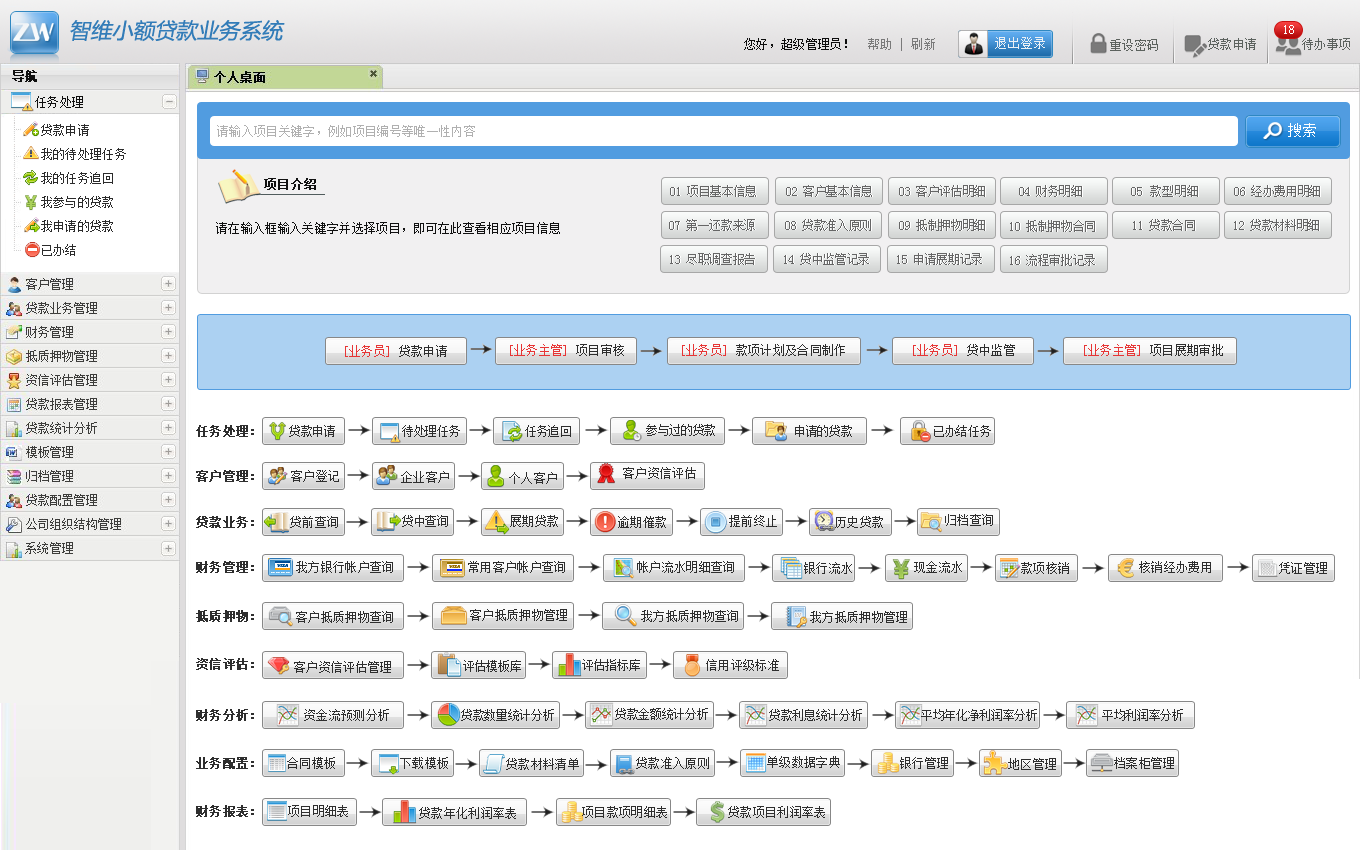
<style>
.page{position:relative;width:1360px;height:850px;background:#ffffff}
.page>*{position:absolute;margin:0}
.t1{font:21.3px "MicrosoftYaHei";color:#327cb8;font-style:italic}
.t2{font:13.3px "SimSun";letter-spacing:-0.05em;color:#ffffff}
.t3{font:13.3px "SimSun";letter-spacing:-0.05em;color:#0c0c0c}
.t4{font:13.3px "SimSun";letter-spacing:-0.05em;color:#7a7a7a}
.t5{font:13.3px "SimSun";color:#ecf1f5}
.t6{font:13.3px "SimSun";letter-spacing:-0.05em;color:#5c625e}
.t7{font:13.3px "SimSun";letter-spacing:-0.05em;color:#0f0f0f;font-weight:bold}
.t8{font:13.3px "SimSun";letter-spacing:-0.05em;color:#0f0f0f}
.t9{font:13.3px/24px "SimSun";letter-spacing:-0.05em;color:#2b2b2b}
.t10{font:13.3px "SimSun";letter-spacing:-0.05em;color:#b0b0b0}
.t11{font:14.7px "SimSun";color:#ffffff}
.t12{font:13.3px "SimSun";letter-spacing:-0.05em;color:#111111;font-weight:bold}
.t13{font:13.3px "SimSun";letter-spacing:-0.1em;color:#666666}
.t14{font:13.3px "SimSun";letter-spacing:-0.1em;color:#666667}
.t15{font:13.3px "SimSun";letter-spacing:-0.05em;color:#666666}
.t16{font:13.3px "SimSun";letter-spacing:-0.05em;color:#111111}
.t17{font:13.3px "SimSun";letter-spacing:-0.05em;color:#e73535}
.t18{font:13.3px "SimSun";letter-spacing:-0.05em;color:#2e2e2e}
.t19{font:13.3px "SimSun";letter-spacing:-0.05em;color:#2e2e2e;font-weight:bold}
.t20{font:13.3px "SimSun";letter-spacing:-0.1em;color:#2e2e2e}
.t21{font:13.3px "SimSun";letter-spacing:-0.05em;color:#3d3d3b}
</style>
<div class="page">
<p class="t1" style="left:70px;top:20px;width:215px;height:22px">智维小额贷款业务系统</p>
<p class="t2" style="left:1284px;top:25px;width:10px;height:9px">18</p>
<p class="t3" style="left:744px;top:38px;width:191px;height:13px">您好，超级管理员！<span class="t4">  帮助 | 刷新</span></p>
<p class="t5" style="left:995px;top:37px;width:50px;height:12px">退出登录</p>
<p class="t6" style="left:1110px;top:39px;width:48px;height:12px">重设密码</p>
<p class="t6" style="left:1208px;top:38px;width:48px;height:12px">贷款申请</p>
<p class="t6" style="left:1302px;top:38px;width:48px;height:12px">待办事项</p>
<p class="t7" style="left:12px;top:70px;width:25px;height:12px">导航</p>
<p class="t8" style="left:35px;top:96px;width:48px;height:12px">任务处理</p>
<p class="t9" style="left:41px;top:124px;width:85px;height:132px">贷款申请<br>我的待处理任务<br>我的任务追回<br>我参与的贷款<br>我申请的贷款<br>已办结</p>
<p class="t10" style="left:217px;top:125px;width:258px;height:12px">请输入项目关键字，例如项目编号等唯一性内容</p>
<p class="t11" style="left:1288px;top:123px;width:28px;height:14px">搜索</p>
<p class="t12" style="left:264px;top:178px;width:52px;height:12px">项目介绍</p>
<p class="t13" style="left:670px;top:185px;width:86px;height:12px">01 项目基本信息</p>
<p class="t13" style="left:786px;top:185px;width:86px;height:12px">02 客户基本信息</p>
<p class="t13" style="left:899px;top:185px;width:86px;height:12px">03 客户评估明细</p>
<p class="t14" style="left:1019px;top:185px;width:63px;height:12px">04 财务明细</p>
<p class="t15" style="left:1131px;top:185px;width:67px;height:12px">05 款型明细</p>
<p class="t13" style="left:1234px;top:185px;width:86px;height:12px">06 经办费用明细</p>
<p class="t16" style="left:216px;top:222px;width:344px;height:12px">请在输入框输入关键字并选择项目，即可在此查看相应项目信息</p>
<p class="t13" style="left:669px;top:219px;width:86px;height:12px">07 第一还款来源</p>
<p class="t13" style="left:785px;top:219px;width:86px;height:12px">08 贷款准入原则</p>
<p class="t13" style="left:899px;top:219px;width:86px;height:12px">09 抵制押物明细</p>
<p class="t13" style="left:1010px;top:220px;width:85px;height:12px">10 抵制押物合同</p>
<p class="t13" style="left:1133px;top:219px;width:62px;height:12px">11 贷款合同</p>
<p class="t13" style="left:1234px;top:219px;width:85px;height:12px">12 贷款材料明细</p>
<p class="t13" style="left:670px;top:253px;width:85px;height:12px">13 尽职调查报告</p>
<p class="t13" style="left:784px;top:253px;width:85px;height:12px">14 贷中监管记录</p>
<p class="t13" style="left:897px;top:253px;width:85px;height:12px">15 申请展期记录</p>
<p class="t13" style="left:1010px;top:254px;width:85px;height:12px">16 流程审批记录</p>
<p class="t17" style="left:345px;top:345px;width:102px;height:12px">[业务员]<span class="t18"> 贷款申请</span></p>
<p class="t17" style="left:510px;top:344px;width:114px;height:12px">[业务主管]<span class="t18"> 项目审核</span></p>
<p class="t18" style="left:682px;top:344px;width:163px;height:12px"><span class="t17">[业务员]</span> 款项计划及合同制作</p>
<p class="t17" style="left:913px;top:344px;width:102px;height:12px">[业务员]<span class="t18"> 贷中监管</span></p>
<p class="t17" style="left:1084px;top:344px;width:139px;height:12px">[业务主管]<span class="t18"> 项目展期审批</span></p>
<p class="t19" style="left:196px;top:425px;width:58px;height:12px">任务处理：</p>
<p class="t20" style="left:289px;top:425px;width:46px;height:12px">贷款申请</p>
<p class="t20" style="left:402px;top:425px;width:58px;height:12px">待处理任务</p>
<p class="t20" style="left:525px;top:425px;width:46px;height:12px">任务追回</p>
<p class="t20" style="left:646px;top:424px;width:69px;height:12px">参与过的贷款</p>
<p class="t20" style="left:795px;top:425px;width:57px;height:12px">申请的贷款</p>
<p class="t20" style="left:934px;top:425px;width:57px;height:12px">已办结任务</p>
<p class="t19" style="left:196px;top:470px;width:58px;height:12px">客户管理：</p>
<p class="t18" style="left:291px;top:470px;width:48px;height:12px">客户登记</p>
<p class="t18" style="left:401px;top:471px;width:48px;height:12px">企业客户</p>
<p class="t18" style="left:509px;top:472px;width:48px;height:12px">个人客户</p>
<p class="t18" style="left:623px;top:467px;width:73px;height:12px">客户资信评估</p>
<p class="t19" style="left:196px;top:516px;width:58px;height:12px">贷款业务：</p>
<p class="t18" style="left:290px;top:516px;width:48px;height:12px">贷前查询</p>
<p class="t20" style="left:402px;top:515px;width:46px;height:12px">贷中查询</p>
<p class="t18" style="left:510px;top:515px;width:48px;height:12px">展期贷款</p>
<p class="t18" style="left:618px;top:516px;width:48px;height:12px">逾期催款</p>
<p class="t18" style="left:729px;top:515px;width:48px;height:12px">提前终止</p>
<p class="t18" style="left:835px;top:516px;width:48px;height:12px">历史贷款</p>
<p class="t18" style="left:945px;top:514px;width:48px;height:12px">归档查询</p>
<p class="t21" style="left:25px;top:542px;width:48px;height:12px">系统管理</p>
<p class="t19" style="left:196px;top:561px;width:58px;height:12px">财务管理：</p>
<p class="t18" style="left:296px;top:561px;width:97px;height:12px">我方银行帐户查询</p>
<p class="t18" style="left:468px;top:561px;width:97px;height:12px">常用客户帐户查询</p>
<p class="t18" style="left:637px;top:561px;width:97px;height:12px">帐户流水明细查询</p>
<p class="t18" style="left:804px;top:562px;width:48px;height:12px">银行流水</p>
<p class="t18" style="left:914px;top:561px;width:48px;height:12px">现金流水</p>
<p class="t18" style="left:1021px;top:562px;width:48px;height:12px">款项核销</p>
<p class="t18" style="left:1139px;top:561px;width:72px;height:12px">核销经办费用</p>
<p class="t18" style="left:1279px;top:562px;width:48px;height:12px">凭证管理</p>
<p class="t19" style="left:196px;top:610px;width:58px;height:12px">抵质押物：</p>
<p class="t18" style="left:296px;top:611px;width:97px;height:12px">客户抵质押物查询</p>
<p class="t18" style="left:470px;top:609px;width:97px;height:12px">客户抵质押物管理</p>
<p class="t18" style="left:641px;top:610px;width:97px;height:12px">我方抵质押物查询</p>
<p class="t18" style="left:810px;top:611px;width:97px;height:12px">我方抵质押物管理</p>
<p class="t19" style="left:196px;top:658px;width:58px;height:12px">资信评估：</p>
<p class="t18" style="left:294px;top:661px;width:97px;height:12px">客户资信评估管理</p>
<p class="t20" style="left:463px;top:660px;width:58px;height:12px">评估模板库</p>
<p class="t20" style="left:582px;top:659px;width:58px;height:12px">评估指标库</p>
<p class="t18" style="left:706px;top:659px;width:73px;height:12px">信用评级标准</p>
<p class="t19" style="left:196px;top:709px;width:58px;height:12px">财务分析：</p>
<p class="t18" style="left:304px;top:709px;width:85px;height:12px">资金流预测分析</p>
<p class="t20" style="left:461px;top:709px;width:93px;height:12px">贷款数量统计分析</p>
<p class="t20" style="left:615px;top:708px;width:93px;height:12px">贷款金额统计分析</p>
<p class="t20" style="left:769px;top:709px;width:93px;height:12px">贷款利息统计分析</p>
<p class="t20" style="left:921px;top:709px;width:116px;height:12px">平均年化净利润率分析</p>
<p class="t20" style="left:1102px;top:709px;width:81px;height:12px">平均利润率分析</p>
<p class="t19" style="left:196px;top:757px;width:58px;height:12px">业务配置：</p>
<p class="t18" style="left:287px;top:757px;width:48px;height:12px">合同模板</p>
<p class="t18" style="left:400px;top:757px;width:48px;height:12px">下载模板</p>
<p class="t18" style="left:506px;top:758px;width:73px;height:12px">贷款材料清单</p>
<p class="t18" style="left:636px;top:757px;width:73px;height:12px">贷款准入原则</p>
<p class="t18" style="left:767px;top:756px;width:73px;height:12px">单级数据字典</p>
<p class="t18" style="left:900px;top:757px;width:48px;height:12px">银行管理</p>
<p class="t18" style="left:1008px;top:758px;width:48px;height:12px">地区管理</p>
<p class="t18" style="left:1114px;top:757px;width:60px;height:12px">档案柜管理</p>
<p class="t19" style="left:196px;top:805px;width:58px;height:12px">财务报表：</p>
<p class="t18" style="left:288px;top:805px;width:60px;height:12px">项目明细表</p>
<p class="t18" style="left:419px;top:807px;width:97px;height:12px">贷款年化利润率表</p>
<p class="t18" style="left:582px;top:806px;width:85px;height:12px">项目款项明细表</p>
<p class="t18" style="left:728px;top:806px;width:97px;height:12px">贷款项目利润率表</p>
</div>
